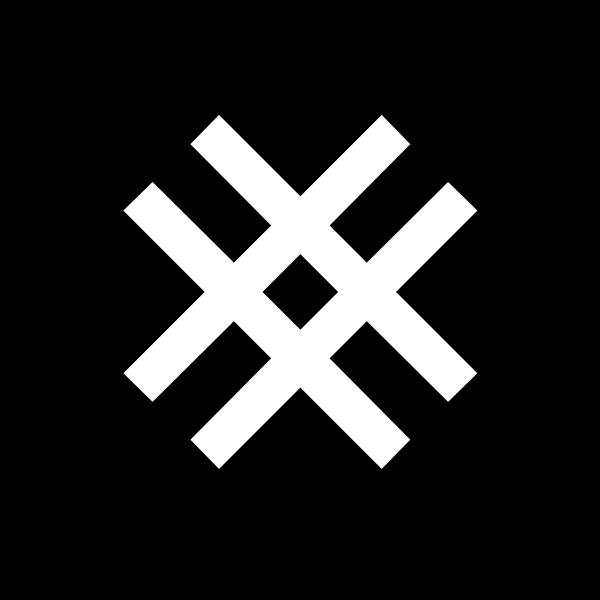
<style>
.page{position:relative;width:600px;height:600px;background:#000000}
.page>*{position:absolute;margin:0}
.t1{font:620.9px "STIXGeneral-Regular";color:#ffffff}
</style>
<div class="page">
<p class="t1" style="left:123px;top:114px;width:355px;height:355px">⨳</p>
</div>
